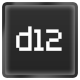
<style>
.page{position:relative;width:80px;height:80px}
.page>*{position:absolute;margin:0}
.t1{font:48px "Kenney-Pixel";color:#ffffff}
</style>
<div class="page">
<p class="t1" style="left:16px;top:26px;width:46px;height:25px">d12</p>
</div>
